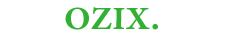
<style>
.page{position:relative;width:250px;height:34px;background:#ffffff}
.page>*{position:absolute;margin:0}
.t1{font:32.4px "MinionConceptRoman-Bold";color:#31b033;scale:1.06 1}
.t2{font:32.4px "MinionConceptRoman-Bold";color:#ffffff;scale:1.06 1}
</style>
<div class="page">
<p class="t1" style="left:65px;top:7px;width:122px;height:23px">OZIX.<span class="t2">to</span></p>
</div>
